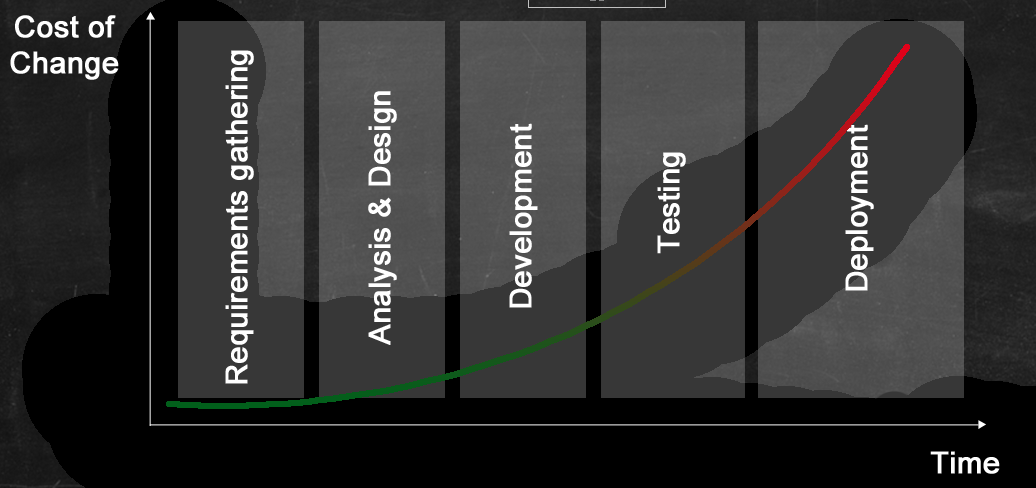
<style>
.page{position:relative;width:1036px;height:488px;background:#000000}
.page>*{position:absolute;margin:0}
.t1{font:30px "ArialMT";color:#ffffff;font-weight:bold}
</style>
<div class="page">
<p class="t1" style="left:10px;top:15px;width:109px;height:65px;text-align:center">Cost of<br>Change</p>
<p class="t1" style="left:225px;top:50px;width:29px;height:334px;rotate:-90deg">Requirements gathering</p>
<p class="t1" style="left:368px;top:91px;width:29px;height:254px;rotate:-90deg">Analysis &amp; Design</p>
<p class="t1" style="left:509px;top:123px;width:29px;height:185px;rotate:-90deg">Development</p>
<p class="t1" style="left:845px;top:124px;width:29px;height:167px;rotate:-90deg">Deployment</p>
<p class="t1" style="left:657px;top:152px;width:29px;height:102px;rotate:-90deg">Testing</p>
<p class="t1" style="left:930px;top:451px;width:70px;height:23px">Time</p>
</div>
